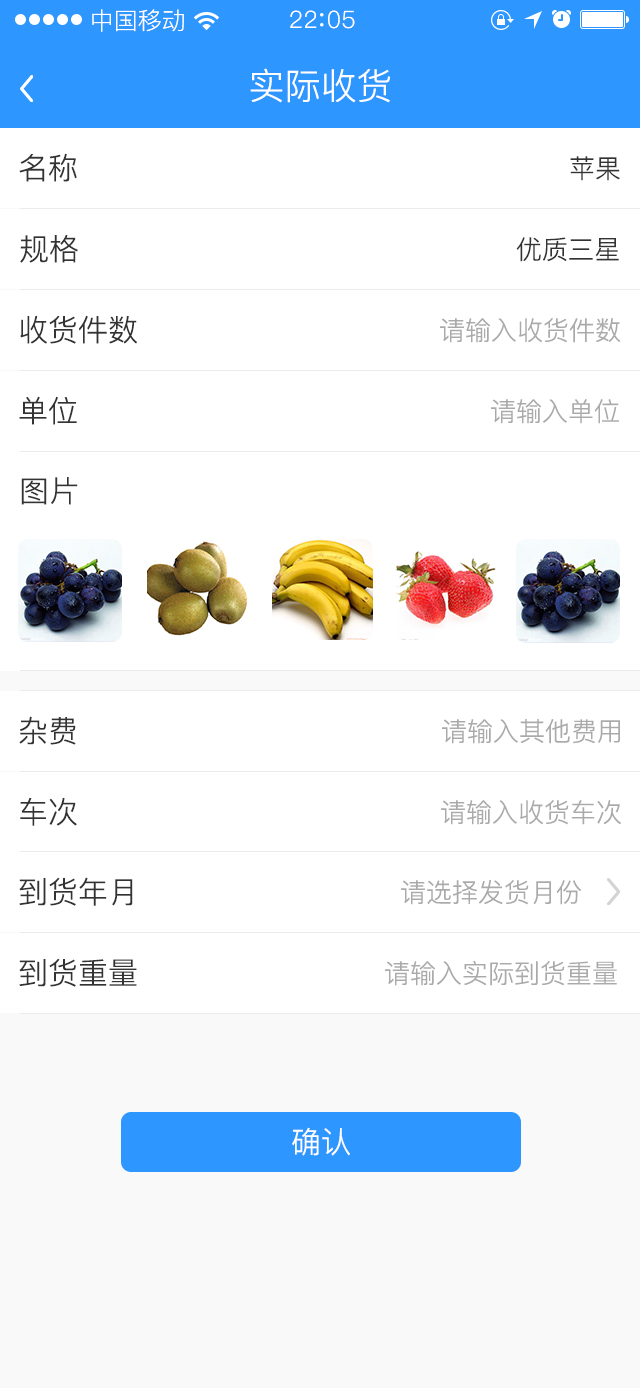
<style>
.page{position:relative;width:640px;height:1388px;background:#ffffff}
.page>*{position:absolute;margin:0}
.t1{font:24px "PingFang-SC-Regular";color:#ffffff}
.t2{font:24px "PingFang-SC-Regular";letter-spacing:0.03em;color:#ffffff}
.t3{font:36px "PingFang-SC-Regular";color:#ffffff}
.t4{font:30px "PingFang-SC-Regular";color:#333333}
.t5{font:26px "PingFang-SC-Regular";color:#333333}
.t6{font:26px "PingFang-SC-Regular";color:#aaaaaa}
.t7{font:30px "PingFang-SC-Regular";color:#ffffff}
</style>
<div class="page">
<p class="t1" style="left:92px;top:9px;width:92px;height:23px">中国移动</p>
<p class="t2" style="left:290px;top:10px;width:65px;height:19px">22 05</p>
<p class="t3" style="left:250px;top:68px;width:140px;height:35px">实际收货</p>
<p class="t4" style="left:19px;top:153px;width:58px;height:29px">名称</p>
<p class="t5" style="left:570px;top:156px;width:50px;height:25px">苹果</p>
<p class="t4" style="left:20px;top:234px;width:58px;height:29px">规格</p>
<p class="t5" style="left:516px;top:237px;width:103px;height:25px">优质三星</p>
<p class="t4" style="left:20px;top:315px;width:117px;height:29px">收货件数</p>
<p class="t6" style="left:440px;top:318px;width:181px;height:25px">请输入收货件数</p>
<p class="t4" style="left:19px;top:396px;width:58px;height:29px">单位</p>
<p class="t6" style="left:491px;top:399px;width:128px;height:25px">请输入单位</p>
<p class="t4" style="left:21px;top:477px;width:57px;height:28px">图片</p>
<p class="t4" style="left:19px;top:716px;width:57px;height:29px">杂费</p>
<p class="t6" style="left:442px;top:719px;width:178px;height:25px">请输入其他费用</p>
<p class="t4" style="left:20px;top:797px;width:57px;height:29px">车次</p>
<p class="t6" style="left:441px;top:800px;width:180px;height:25px">请输入收货车次</p>
<p class="t4" style="left:19px;top:877px;width:114px;height:29px">到货年月</p>
<p class="t6" style="left:401px;top:880px;width:180px;height:25px">请选择发货月份</p>
<p class="t4" style="left:19px;top:958px;width:118px;height:29px">到货重量</p>
<p class="t6" style="left:385px;top:961px;width:232px;height:25px">请输入实际到货重量</p>
<p class="t7" style="left:292px;top:1127px;width:58px;height:29px">确认</p>
</div>
